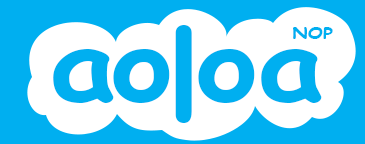
<style>
.page{position:relative;width:365px;height:144px;background:#00aff0}
.page>*{position:absolute;margin:0}
.t1{font:100px "ComicSansMS-Bold";letter-spacing:-0.04em;color:#00aff0;scale:1.18 1}
.t2{font:121px "ComicSansMS-Bold";letter-spacing:-0.04em;color:#00aff0}
.t3{font:100px "ComicSansMS-Bold";color:#00aff0;scale:1.18 1}
.t4{font:16px "ComicSansMS-Bold";color:#00aff0;scale:1.18 1}
</style>
<div class="page">
<p class="t1" style="left:53px;top:25px;width:269px;height:98px">ao<span class="t2">l</span><span class="t3">oa</span></p>
<p class="t4" style="left:293px;top:27px;width:40px;height:12px">NOP</p>
</div>
